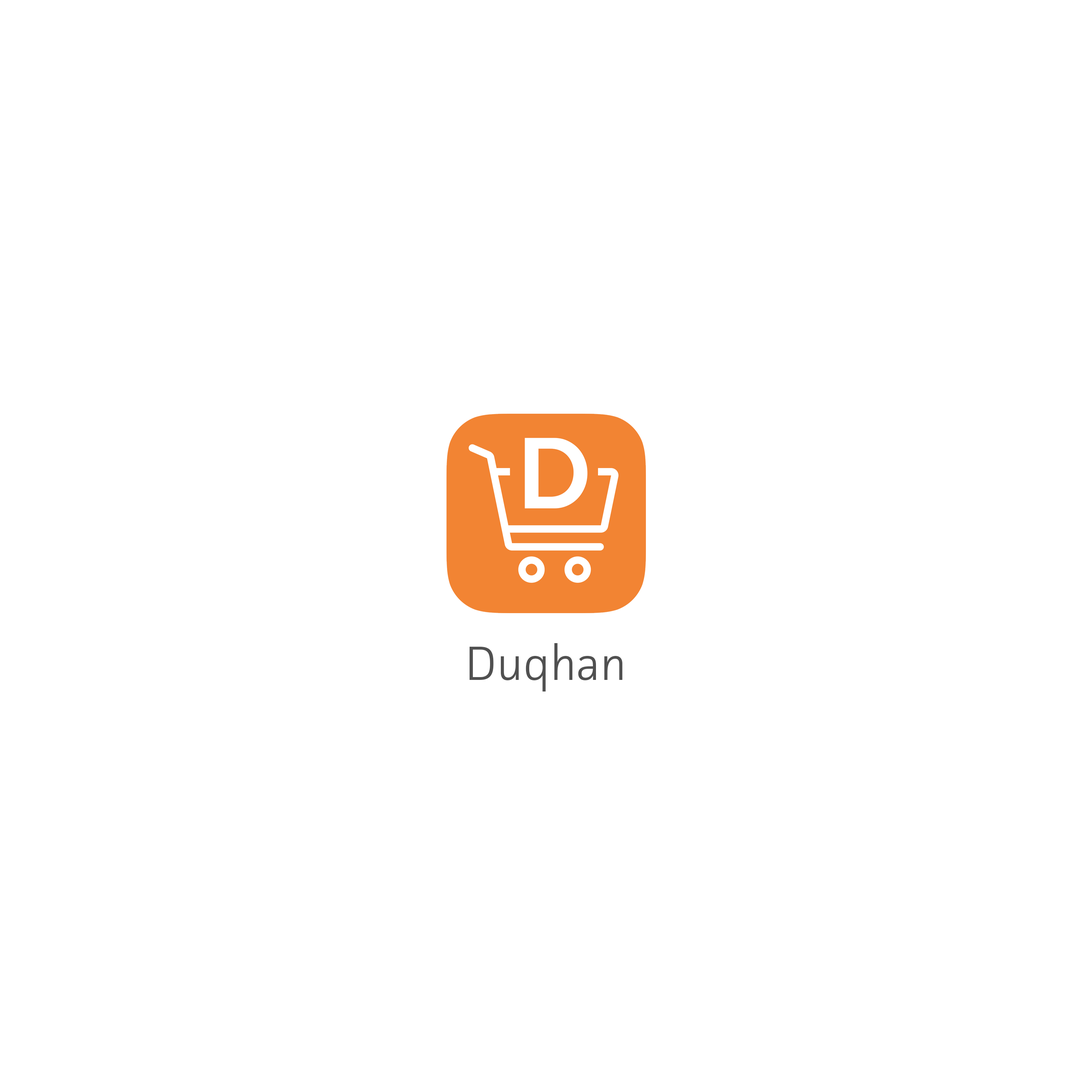
<style>
.page{position:relative;width:1092px;height:1092px;background:#ffffff}
.page>*{position:absolute;margin:0}
.t1{font:48px "Facit-Light";color:#505050}
</style>
<div class="page">
<p class="t1" style="left:469px;top:643px;width:153px;height:48px">Duqhan</p>
</div>
